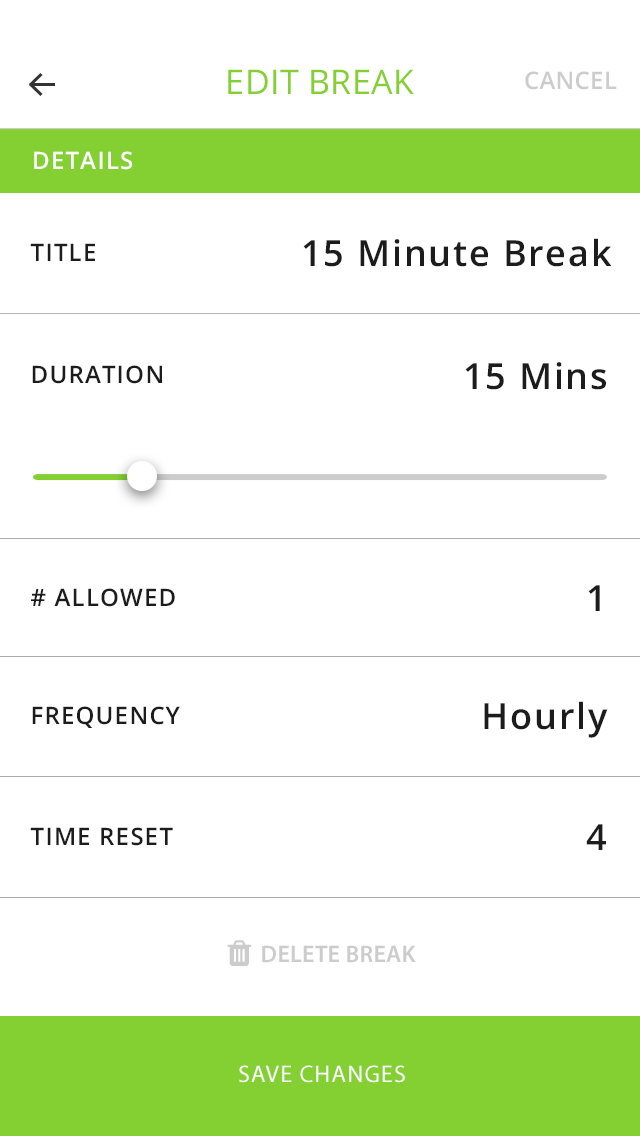
<style>
.page{position:relative;width:640px;height:1136px;background:#ffffff}
.page>*{position:absolute;margin:0}
.t1{font:34px "OpenSans";letter-spacing:0.01em;color:#84d033;text-transform:uppercase}
.t2{font:24px "OpenSans-Semibold";letter-spacing:0.01em;color:#cccccc}
.t3{font:24px "OpenSans-Semibold";letter-spacing:0.05em;color:#ffffff;text-transform:uppercase}
.t4{font:24px "OpenSans-Semibold";letter-spacing:0.05em;color:#1c1c1c;text-transform:uppercase}
.t5{font:36px "OpenSans-Semibold";letter-spacing:0.05em;color:#1c1c1c}
.t6{font:24px "MyriadPro-Regular";letter-spacing:0.05em;color:#ffffff;text-transform:uppercase}
</style>
<div class="page">
<p class="t1" style="left:228px;top:69px;width:186px;height:25px">Edit Break</p>
<p class="t2" style="left:525px;top:71px;width:92px;height:19px">CANCEL</p>
<p class="t3" style="left:34px;top:151px;width:99px;height:19px">DETAILS</p>
<p class="t4" style="left:30px;top:243px;width:65px;height:18px">TITLE</p>
<p class="t5" style="left:303px;top:238px;width:309px;height:29px">15 Minute Break</p>
<p class="t4" style="left:32px;top:365px;width:130px;height:19px">DURATION</p>
<p class="t5" style="left:465px;top:362px;width:141px;height:28px">15 Mins</p>
<p class="t4" style="left:31px;top:588px;width:144px;height:19px"># ALLOWED</p>
<p class="t5" style="left:588px;top:585px;width:12px;height:26px">1</p>
<p class="t5" style="left:484px;top:701px;width:124px;height:37px">Hourly</p>
<p class="t4" style="left:32px;top:706px;width:148px;height:22px">Frequency</p>
<p class="t4" style="left:30px;top:827px;width:143px;height:19px">TIME RESeT</p>
<p class="t5" style="left:586px;top:824px;width:20px;height:26px">4</p>
<p class="t6" style="left:239px;top:1065px;width:166px;height:18px">SAVE CHANGES</p>
</div>
